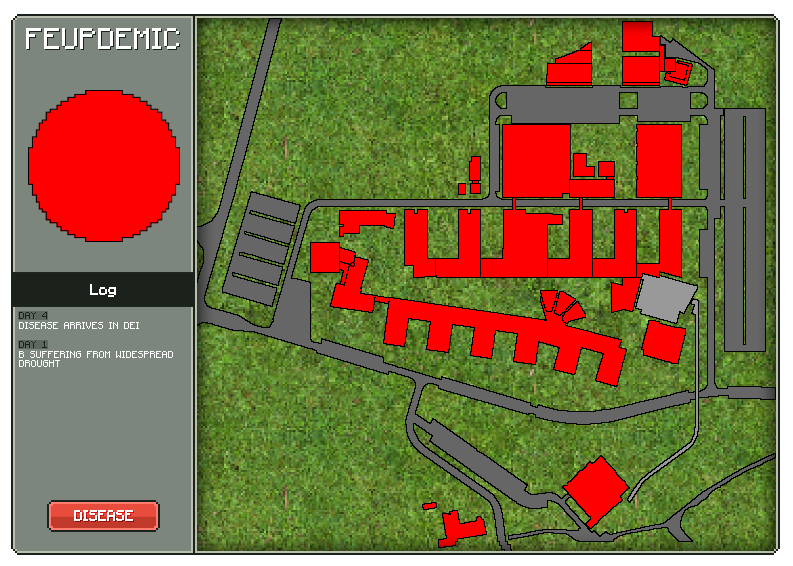
<style>
.page{position:relative;width:793px;height:566px}
.page>*{position:absolute;margin:0}
.t1{font:24px "Minecraftia";color:#ffffff;text-transform:uppercase}
.t2{font:12px "Minecraftia";color:#ffffff}
.t3{font:8px "Minecraftia";color:#ffffff;text-transform:uppercase}
.t4{font:8px "Minecraftia";color:#1b211b;text-transform:uppercase}
.t5{font:12px "Minecraftia";color:#fefefe;text-transform:uppercase}
</style>
<div class="page">
<p class="t1" style="left:26px;top:28px;width:153px;height:21px">FEUPdemic</p>
<p class="t2" style="left:90px;top:284px;width:26px;height:13px">Log</p>
<p class="t3" style="left:19px;top:312px;width:154px;height:55px"><span class="t4">DAY 4<br></span>DIseaSE arrives in DEI<br><br><span class="t4">DAY 1<br></span>B Suffering from widespread<br>drought</p>
<p class="t5" style="left:74px;top:510px;width:59px;height:11px">Disease</p>
</div>
